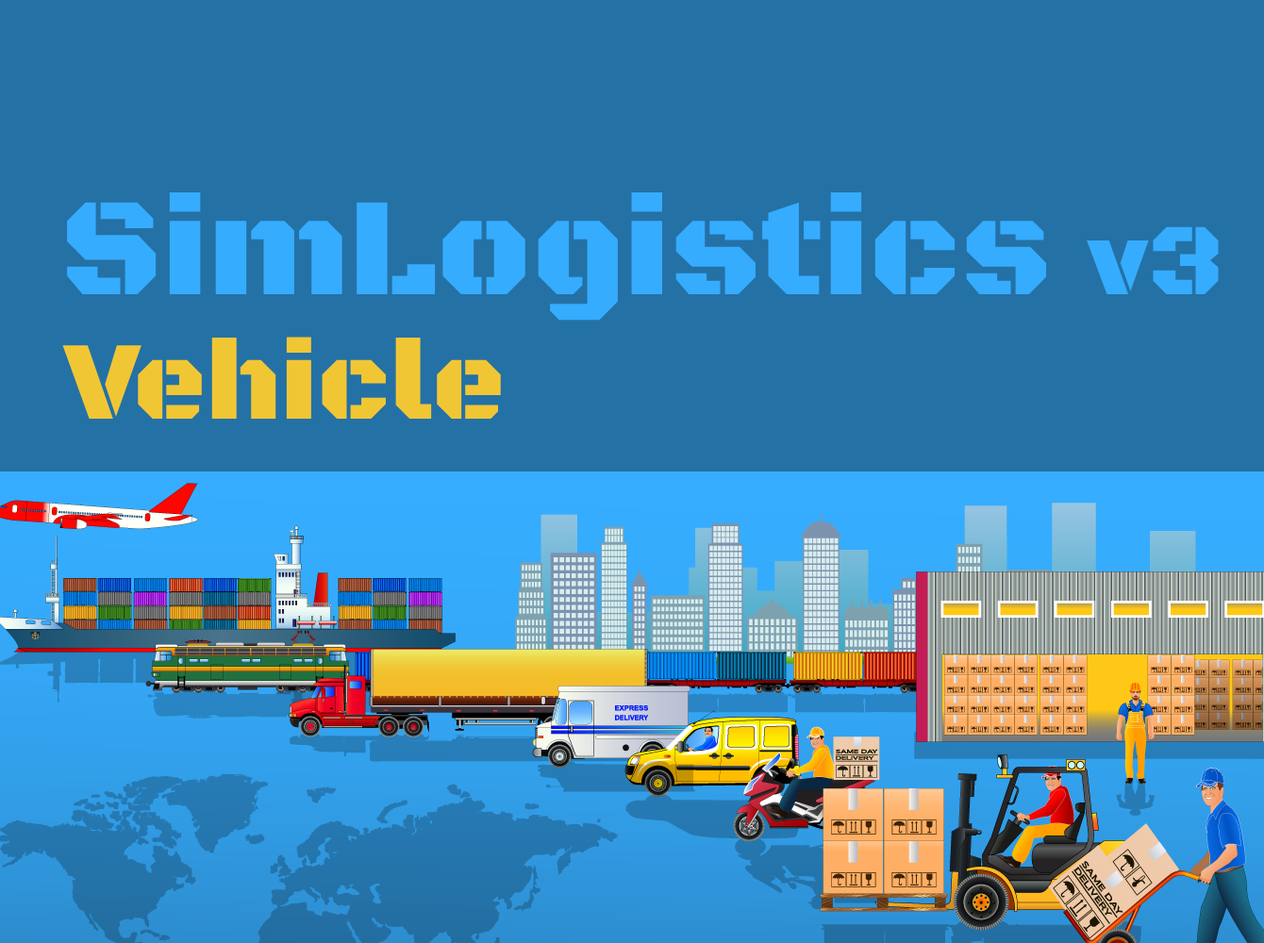
<style>
.page{position:relative;width:1264px;height:943px;background:#2471a6}
.page>*{position:absolute;margin:0}
.t1{font:141.5px "BlackOpsOne-Regular";color:#36acfe}
.t2{font:103.8px "BlackOpsOne-Regular";color:#36acfe}
.t3{font:113.2px "BlackOpsOne-Regular";color:#f1c635}
</style>
<div class="page">
<p class="t1" style="left:67px;top:191px;width:1152px;height:130px">SimLogistics <span class="t2">v3</span></p>
<p class="t3" style="left:62px;top:337px;width:439px;height:82px">Vehicle</p>
</div>
